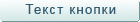
<style>
.page{position:relative;width:140px;height:22px}
.page>*{position:absolute;margin:0}
.t1{font:13px "ArialMT";letter-spacing:0.099em;color:#345a70}
</style>
<div class="page">
<p class="t1" style="left:25px;top:4px;width:91px;height:10px">Текст кнопки</p>
</div>
